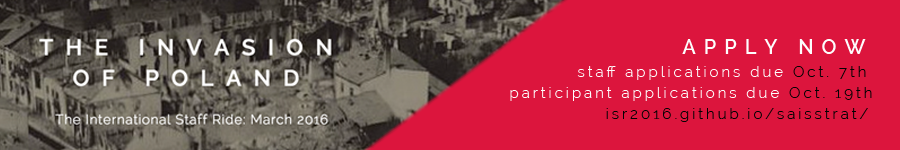
<style>
.page{position:relative;width:900px;height:150px;background:#dc153d}
.page>*{position:absolute;margin:0}
.t1{font:20px "Raleway-SemiBold";letter-spacing:0.4em;color:#fdfdfd}
.t2{font:15px "Raleway-Light";letter-spacing:0.2em;color:#fdfdfd}
.t3{font:15px "Raleway-Light";letter-spacing:0.2em;color:#020202}
</style>
<div class="page">
<p class="t1" style="left:682px;top:39px;width:184px;height:15px">APPLY NOW</p>
<p class="t2" style="left:577px;top:66px;width:289px;height:14px">staff applications due <span class="t3">Oct. 7th</span></p>
<p class="t2" style="left:510px;top:87px;width:362px;height:14px">participant applications due <span class="t3">Oct. 19th</span></p>
<p class="t3" style="left:606px;top:108px;width:262px;height:14px">isr2016.github.io/saisstrat/</p>
</div>
